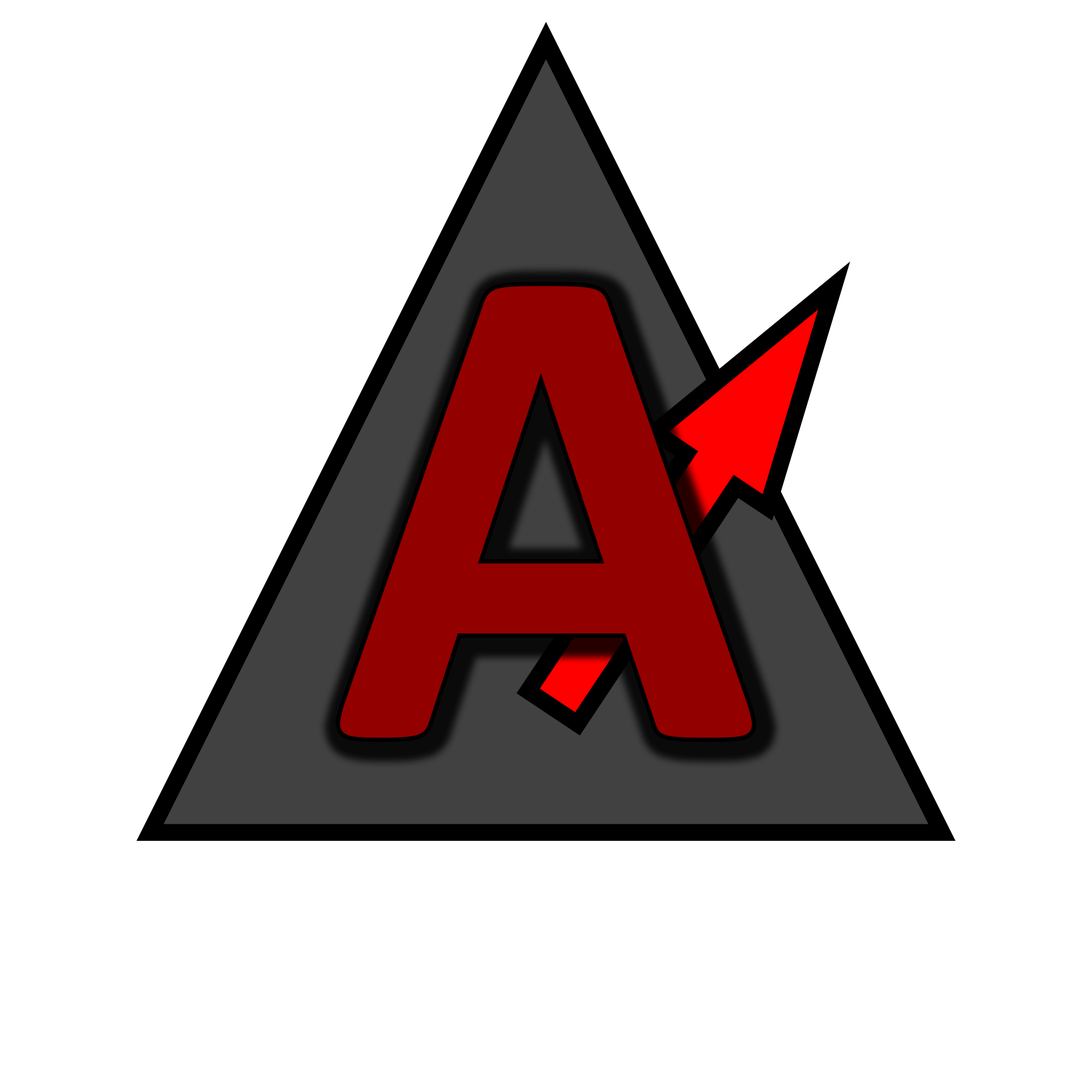
<style>
.page{position:relative;width:1092px;height:1092px;background:#ffffff}
.page>*{position:absolute;margin:0}
.t1{font:707.6px "Calibri-Bold";color:#930000}
</style>
<div class="page">
<p class="t1" style="left:340px;top:286px;width:412px;height:452px">A</p>
</div>
